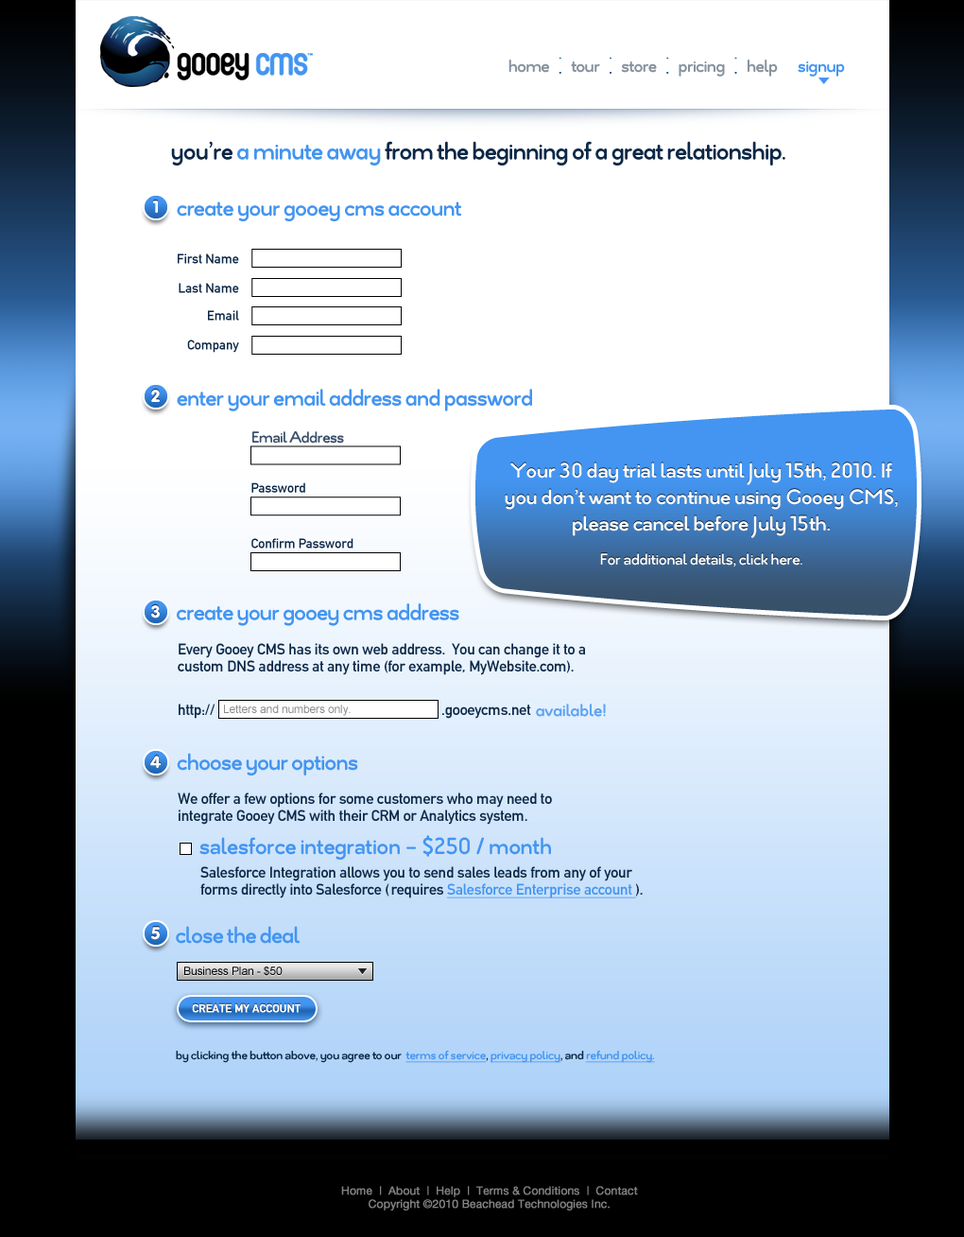
<style>
.page{position:relative;width:964px;height:1237px;background:#ffffff}
.page>*{position:absolute;margin:0}
.t1{font:17px "VAGRounded-Black";letter-spacing:-0.025em;color:#ffffff}
.t2{font:17px "EstiloText-Bold";letter-spacing:-0.025em;color:#3a506a}
.t3{font:22.7px/26.5px "EstiloText-Bold";letter-spacing:-0.01em;color:#fdfeff}
.t4{font:17px/28.4px "EstiloText-Bold";letter-spacing:-0.01em;color:#fdfeff}
.t5{font:15.1px/17px "DINMittelschrift";letter-spacing:-0.01em;color:#0c2847}
.t6{font:15.1px "DINMittelschrift";letter-spacing:-0.01em;color:#0c2847}
.t7{font:11.3px "ArialMT";letter-spacing:-0.01em;color:#8b8b8b}
.t8{font:24.6px "EstiloText-Bold";letter-spacing:-0.01em;color:#4395f1}
.t9{font:15.1px/17px "DINMittelschrift";letter-spacing:-0.01em;color:#4395f1;text-decoration:underline}
.t10{font:11.3px "ArialMT";letter-spacing:-0.01em;color:#000000}
.t11{font:11.3px "DINMittelschrift";letter-spacing:-0.01em;color:#fefdfd;font-weight:bold}
.t12{font:13.2px "EstiloText-Bold";letter-spacing:-0.01em;color:#0c2847}
.t13{font:13.2px "EstiloText-Bold";letter-spacing:-0.01em;color:#4395f1;text-decoration:underline}
.t14{font:11.3px "HelveticaNeue-Roman";letter-spacing:-0.01em;color:#828282;font-weight:bold}
</style>
<div class="page">
<p class="t1" style="left:153px;top:200px;width:5px;height:13px">1</p>
<p class="t1" style="left:151px;top:390px;width:9px;height:12px">2</p>
<p class="t2" style="left:252px;top:431px;width:92px;height:12px">Email Address</p>
<p class="t3" style="left:505px;top:462px;width:393px;height:105px;text-align:center">Your 30 day trial lasts until July 15th, 2010. If you don’t want to continue using Gooey CMS, please cancel before July 15th.<br><br><span class="t4">For additional details, click here.</span></p>
<p class="t1" style="left:151px;top:605px;width:9px;height:13px">3</p>
<p class="t5" style="left:178px;top:643px;width:407px;height:32px">Every Gooey CMS has its own web address.  You can change it to a custom DNS address at any time (for example, MyWebsite.com).</p>
<p class="t6" style="left:179px;top:703px;width:37px;height:15px">http://</p>
<p class="t7" style="left:224px;top:704px;width:127px;height:12px">Letters and numbers only.</p>
<p class="t6" style="left:442px;top:704px;width:89px;height:14px">.gooeycms.net</p>
<p class="t1" style="left:150px;top:755px;width:11px;height:13px">4</p>
<p class="t5" style="left:178px;top:792px;width:374px;height:32px">We offer a few options for some customers who may need to integrate Gooey CMS with their CRM or Analytics system.</p>
<p class="t8" style="left:199px;top:835px;width:352px;height:24px">salesforce integration - $250 / month</p>
<p class="t5" style="left:200px;top:866px;width:443px;height:32px">Salesforce Integration allows you to send sales leads from any of your forms directly into Salesforce ( requires <span class="t9">Salesforce Enterprise account </span>).</p>
<p class="t1" style="left:151px;top:926px;width:9px;height:14px">5</p>
<p class="t10" style="left:184px;top:965px;width:99px;height:11px">Business Plan - $50</p>
<p class="t11" style="left:192px;top:1003px;width:109px;height:10px">CREATE MY ACCOUNT</p>
<p class="t12" style="left:176px;top:1050px;width:479px;height:13px">by clicking the button above, you agree to our  <span class="t13">terms of service</span>, <span class="t13">privacy policy</span>, and <span class="t13">refund policy.</span></p>
<p class="t14" style="left:341px;top:1186px;width:297px;height:24px;text-align:center">Home  |  About  |  Help  |  Terms &amp; Conditions  |  Contact<br>Copyright ©2010 Beachead Technologies Inc.</p>
</div>
